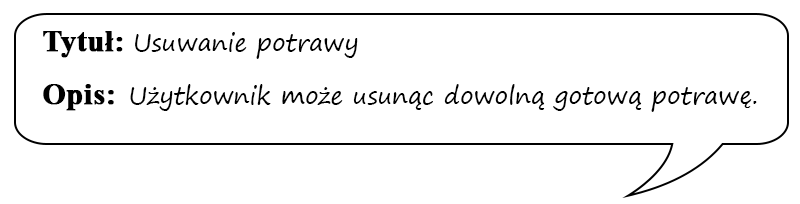
<style>
.page{position:relative;width:800px;height:204px;background:#ffffff}
.page>*{position:absolute;margin:0}
.t1{font:24px "SegoePrint";color:#000000}
.t2{font:30px "TimesNewRomanPS-BoldMT";color:#000000;font-weight:bold}
</style>
<div class="page">
<p class="t1" style="left:43px;top:31px;width:714px;height:81px"><span class="t2">Tytuł: </span>Usuwanie potrawy<br><br><span class="t2">Opis:  </span>Użytkownik może usunąc dowolną gotową potrawę.</p>
</div>
